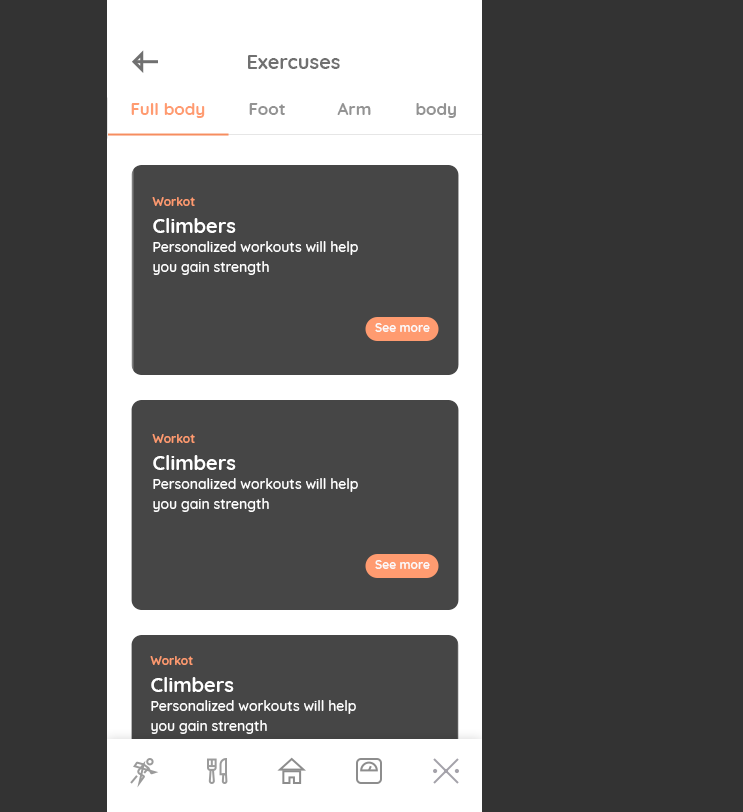
<style>
.page{position:relative;width:743px;height:812px;background:#333333}
.page>*{position:absolute;margin:0}
.t1{font:20px "Quicksand-Bold";color:#707070}
.t2{font:17px "Quicksand-Bold";color:#ff9b70}
.t3{font:17px "Quicksand-Bold";color:#939393}
.t4{font:12px "Quicksand-Bold";color:#ff9b70}
.t5{font:20px "Quicksand-Bold";color:#ffffff}
.t6{font:14px/20px "Quicksand-Medium";color:#ffffff}
.t7{font:12px "Quicksand-Bold";color:#fbf9f9}
</style>
<div class="page">
<p class="t1" style="left:248px;top:55px;width:92px;height:14px">Exercuses</p>
<p class="t2" style="left:131px;top:103px;width:74px;height:15px">Full body</p>
<p class="t3" style="left:249px;top:103px;width:36px;height:12px">Foot</p>
<p class="t3" style="left:337px;top:103px;width:34px;height:12px">Arm</p>
<p class="t3" style="left:416px;top:103px;width:40px;height:15px">body</p>
<p class="t4" style="left:152px;top:197px;width:43px;height:9px">Workot</p>
<p class="t5" style="left:153px;top:218px;width:83px;height:15px">Climbers</p>
<p class="t6" style="left:153px;top:241px;width:205px;height:34px">Personalized workouts will help you gain strength</p>
<p class="t7" style="left:375px;top:323px;width:55px;height:9px">See more</p>
<p class="t4" style="left:152px;top:434px;width:43px;height:9px">Workot</p>
<p class="t5" style="left:153px;top:455px;width:83px;height:15px">Climbers</p>
<p class="t6" style="left:153px;top:478px;width:205px;height:34px">Personalized workouts will help you gain strength</p>
<p class="t7" style="left:375px;top:560px;width:55px;height:9px">See more</p>
<p class="t4" style="left:150px;top:656px;width:43px;height:9px">Workot</p>
<p class="t5" style="left:151px;top:677px;width:83px;height:15px">Climbers</p>
<p class="t6" style="left:151px;top:700px;width:205px;height:34px">Personalized workouts will help you gain strength</p>
</div>
